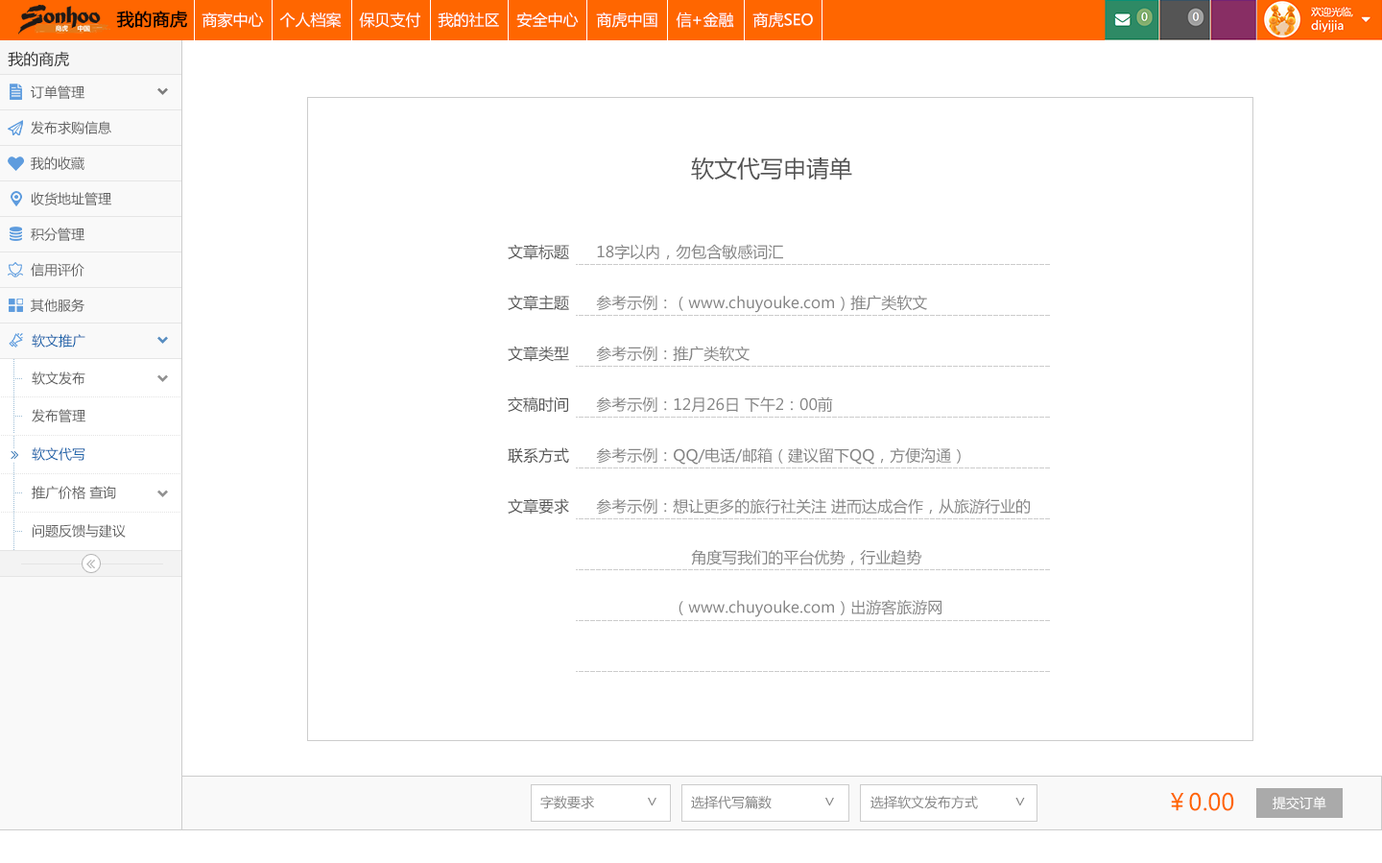
<style>
.page{position:relative;width:1382px;height:863px;background:#ffffff}
.page>*{position:absolute;margin:0}
.t1{font:17.3px "MicrosoftYaHei";color:#000000;font-weight:bold}
.t2{font:15.4px "MicrosoftYaHei";color:#ffffff}
.t3{font:15.4px "MicrosoftYaHei";color:#2d2d2d}
.t4{font:13.4px "MicrosoftYaHei";color:#616161}
.t5{font:23px "MicrosoftYaHei";color:#545454}
.t6{font:15.4px "MicrosoftYaHei";color:#858585}
.t7{font:15.4px "MicrosoftYaHei";color:#545454}
.t8{font:13.4px "MicrosoftYaHei";color:#1963aa}
.t9{font:3.8px "SimSun";color:#9dbdd6}
.t10{font:3.8px "SimSun";color:#e4e4e4}
.t11{font:13.4px "MicrosoftYaHei";color:#858585}
.t12{font:17.3px "MicrosoftYaHei";color:#858585}
.t13{font:23px "MicrosoftYaHei";color:#ff6600}
.t14{font:13.4px "MicrosoftYaHei";color:#ffffff}
</style>
<div class="page">
<p class="t1" style="left:116px;top:11px;width:71px;height:17px">我的商虎</p>
<p class="t2" style="left:202px;top:12px;width:62px;height:16px">商家中心</p>
<p class="t2" style="left:279px;top:12px;width:63px;height:16px">个人档案</p>
<p class="t2" style="left:359px;top:12px;width:61px;height:16px">保贝支付</p>
<p class="t2" style="left:438px;top:12px;width:61px;height:16px">我的社区</p>
<p class="t2" style="left:516px;top:12px;width:63px;height:16px">安全中心</p>
<p class="t2" style="left:596px;top:12px;width:61px;height:16px">商虎中国</p>
<p class="t2" style="left:676px;top:12px;width:58px;height:16px">信+金融</p>
<p class="t2" style="left:752px;top:12px;width:61px;height:16px">商虎SEO</p>
<p class="t3" style="left:8px;top:51px;width:61px;height:16px">我的商虎</p>
<p class="t4" style="left:31px;top:85px;width:53px;height:14px">订单管理</p>
<p class="t4" style="left:31px;top:121px;width:80px;height:13px">发布求购信息</p>
<p class="t4" style="left:31px;top:156px;width:53px;height:14px">我的收藏</p>
<p class="t5" style="left:691px;top:156px;width:161px;height:24px">软文代写申请单</p>
<p class="t4" style="left:31px;top:192px;width:80px;height:13px">收货地址管理</p>
<p class="t4" style="left:31px;top:227px;width:53px;height:14px">积分管理</p>
<p class="t6" style="left:508px;top:244px;width:275px;height:16px"><span class="t7">文章标题      </span>18字以内，勿包含敏感词汇</p>
<p class="t4" style="left:31px;top:263px;width:53px;height:13px">信用评价</p>
<p class="t4" style="left:31px;top:298px;width:53px;height:14px">其他服务</p>
<p class="t6" style="left:508px;top:295px;width:419px;height:18px"><span class="t7">文章主题      </span>参考示例：（www.chuyouke.com）推广类软文</p>
<p class="t8" style="left:32px;top:334px;width:53px;height:13px">软文推广</p>
<p class="t6" style="left:508px;top:346px;width:242px;height:16px"><span class="t7">文章类型      </span>参考示例：推广类软文</p>
<p class="t9" style="left:13px;top:359px;width:1px;height:26px">..............</p>
<p class="t4" style="left:32px;top:371px;width:53px;height:14px">软文发布</p>
<p class="t9" style="left:13px;top:386px;width:1px;height:47px">.........................</p>
<p class="t9" style="left:15px;top:378px;width:7px;height:1px">....</p>
<p class="t10" style="left:1px;top:396px;width:179px;height:1px">..............................................................................................</p>
<p class="t6" style="left:508px;top:396px;width:325px;height:17px"><span class="t7">交稿时间      </span>参考示例：12月26日 下午2：00前</p>
<p class="t4" style="left:32px;top:409px;width:53px;height:13px">发布管理</p>
<p class="t9" style="left:15px;top:416px;width:7px;height:1px">....</p>
<p class="t10" style="left:1px;top:435px;width:179px;height:1px">..............................................................................................</p>
<p class="t9" style="left:13px;top:436px;width:1px;height:12px">.......</p>
<p class="t8" style="left:32px;top:447px;width:53px;height:14px">软文代写</p>
<p class="t6" style="left:508px;top:447px;width:453px;height:18px"><span class="t7">联系方式      </span>参考示例：QQ/电话/邮箱（建议留下QQ，方便沟通）</p>
<p class="t10" style="left:1px;top:473px;width:179px;height:1px">..............................................................................................</p>
<p class="t9" style="left:13px;top:463px;width:1px;height:10px">......</p>
<p class="t9" style="left:13px;top:474px;width:1px;height:28px">...............</p>
<p class="t4" style="left:32px;top:486px;width:84px;height:13px">推广价格 查询</p>
<p class="t9" style="left:15px;top:492px;width:7px;height:1px">....</p>
<p class="t9" style="left:13px;top:503px;width:1px;height:47px">.........................</p>
<p class="t6" style="left:508px;top:498px;width:522px;height:16px"><span class="t7">文章要求      </span>参考示例：想让更多的旅行社关注 进而达成合作，从旅游行业的</p>
<p class="t10" style="left:1px;top:512px;width:179px;height:1px">..............................................................................................</p>
<p class="t9" style="left:15px;top:531px;width:7px;height:1px">....</p>
<p class="t4" style="left:33px;top:524px;width:93px;height:13px">问题反馈与建议</p>
<p class="t6" style="left:691px;top:549px;width:230px;height:16px">角度写我们的平台优势，行业趋势</p>
<p class="t6" style="left:679px;top:599px;width:263px;height:18px">（www.chuyouke.com）出游客旅游网</p>
<p class="t11" style="left:540px;top:796px;width:116px;height:13px">字数要求             <span class="t12">∨</span></p>
<p class="t11" style="left:691px;top:796px;width:143px;height:13px">选择代写篇数             <span class="t12">∨</span></p>
<p class="t11" style="left:870px;top:796px;width:155px;height:13px">选择软文发布方式         <span class="t12">∨</span></p>
<p class="t13" style="left:1171px;top:792px;width:63px;height:19px">￥0.00</p>
<p class="t14" style="left:1273px;top:796px;width:53px;height:14px">提交订单</p>
</div>
